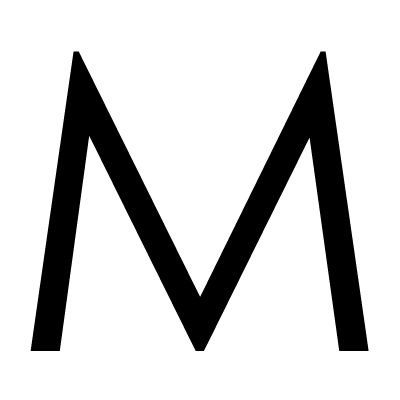
<style>
.page{position:relative;width:400px;height:400px;background:#ffffff}
.page>*{position:absolute;margin:0}
.t1{font:416.7px "CenturyGothic";color:#000000}
</style>
<div class="page">
<p class="t1" style="left:30px;top:51px;width:339px;height:300px">M</p>
</div>
